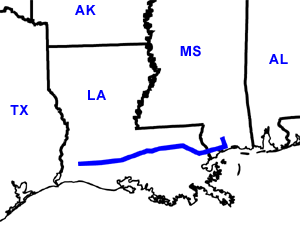
<style>
.page{position:relative;width:300px;height:233px;background:#ffffff}
.page>*{position:absolute;margin:0}
.t1{font:14px "Arial-BoldMT";letter-spacing:0.05em;color:#0000ff}
</style>
<div class="page">
<p class="t1" style="left:75px;top:5px;width:21px;height:10px">AK</p>
<p class="t1" style="left:180px;top:45px;width:21px;height:12px">MS</p>
<p class="t1" style="left:269px;top:54px;width:19px;height:10px">AL</p>
<p class="t1" style="left:88px;top:90px;width:18px;height:10px">LA</p>
<p class="t1" style="left:10px;top:105px;width:19px;height:10px">TX</p>
</div>
